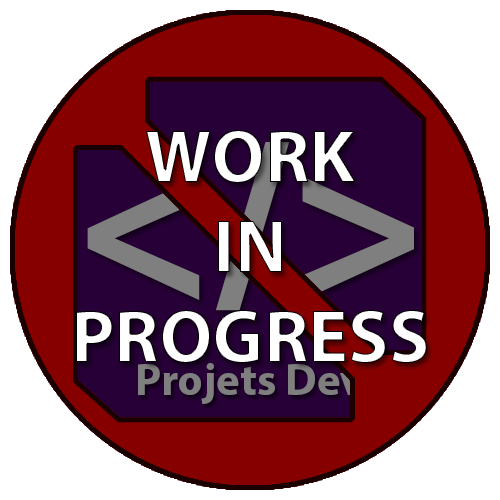
<style>
.page{position:relative;width:500px;height:500px;background:#ffffff}
.page>*{position:absolute;margin:0}
.t1{font:75px "MyriadPro-Bold";color:#ffffff}
.t2{font:231.9px "MyriadPro-Bold";color:#7f7f7f}
.t3{font:45px "MyriadPro-Bold";color:#7f7f7f}
</style>
<div class="page">
<p class="t1" style="left:76px;top:130px;width:351px;height:233px;text-align:center">WORK<br>IN<br>PROGRESS</p>
<p class="t2" style="left:87px;top:142px;width:327px;height:169px">&lt;/&gt;</p>
<p class="t3" style="left:138px;top:363px;width:225px;height:41px">Projets Dev</p>
</div>
